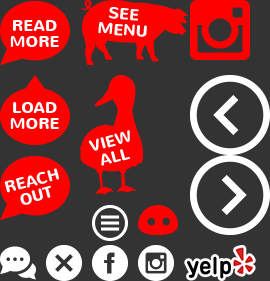
<style>
.page{position:relative;width:270px;height:281px;background:#333333}
.page>*{position:absolute;margin:0}
.t1{font:16px/16px "Nunito-Bold";color:#ffffff;text-transform:uppercase}
.t2{font:16px/16px "Nunito-Bold";color:#fffefe;text-transform:uppercase}
</style>
<div class="page">
<p class="t1" style="left:98px;top:7px;width:49px;height:30px;text-align:center;rotate:4deg">see<br>menu</p>
<p class="t2" style="left:10px;top:20px;width:49px;height:27px;text-align:center">Read<br>More</p>
<p class="t2" style="left:10px;top:102px;width:49px;height:27px;text-align:center">Load<br>More</p>
<p class="t1" style="left:88px;top:130px;width:42px;height:36px;text-align:center;rotate:-15deg">view<br>all</p>
<p class="t2" style="left:4px;top:168px;width:55px;height:37px;text-align:center;rotate:-15deg">Reach<br>Out</p>
</div>
